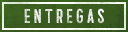
<style>
.page{position:relative;width:128px;height:32px}
.page>*{position:absolute;margin:0}
.t1{font:18.7px "HillstownCondensedClean";letter-spacing:0.2em;text-transform:uppercase}
</style>
<div class="page">
<p class="t1" style="left:24px;top:8px;width:80px;height:16px">entregas</p>
</div>
